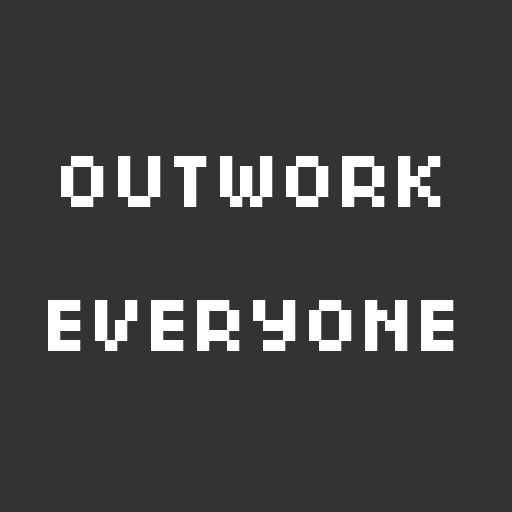
<style>
.page{position:relative;width:512px;height:512px;background:#333333}
.page>*{position:absolute;margin:0}
.t1{font:80px "04b03";letter-spacing:0.05em;color:#ffffff;font-weight:bold}
</style>
<div class="page">
<p class="t1" style="left:61px;top:156px;width:380px;height:51px">OUTWORK</p>
<p class="t1" style="left:48px;top:300px;width:406px;height:51px">EVERYONE</p>
</div>
